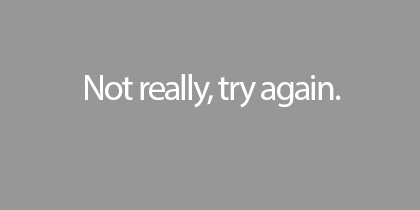
<style>
.page{position:relative;width:420px;height:210px;background:#979797}
.page>*{position:absolute;margin:0}
.t1{font:36px "MyriadPro-Regular";letter-spacing:-0.05em;color:#ffffff}
</style>
<div class="page">
<p class="t1" style="left:85px;top:74px;width:256px;height:34px">Not really, try again.</p>
</div>
